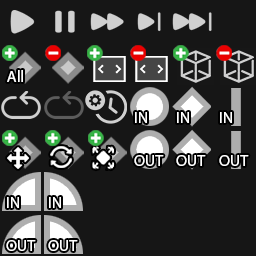
<style>
.page{position:relative;width:256px;height:256px;background:#161616}
.page>*{position:absolute;margin:0}
.t1{font:16px "MyriadPro-Regular";color:#ffffff}
</style>
<div class="page">
<p class="t1" style="left:7px;top:70px;width:16px;height:12px">All</p>
<p class="t1" style="left:135px;top:112px;width:12px;height:11px">IN</p>
<p class="t1" style="left:177px;top:112px;width:12px;height:11px">IN</p>
<p class="t1" style="left:220px;top:112px;width:12px;height:11px">IN</p>
<p class="t1" style="left:134px;top:155px;width:30px;height:11px">OUT</p>
<p class="t1" style="left:176px;top:155px;width:30px;height:11px">OUT</p>
<p class="t1" style="left:219px;top:155px;width:30px;height:11px">OUT</p>
<p class="t1" style="left:7px;top:197px;width:12px;height:11px">IN</p>
<p class="t1" style="left:49px;top:197px;width:12px;height:11px">IN</p>
<p class="t1" style="left:6px;top:240px;width:30px;height:11px">OUT</p>
<p class="t1" style="left:48px;top:240px;width:30px;height:11px">OUT</p>
</div>
